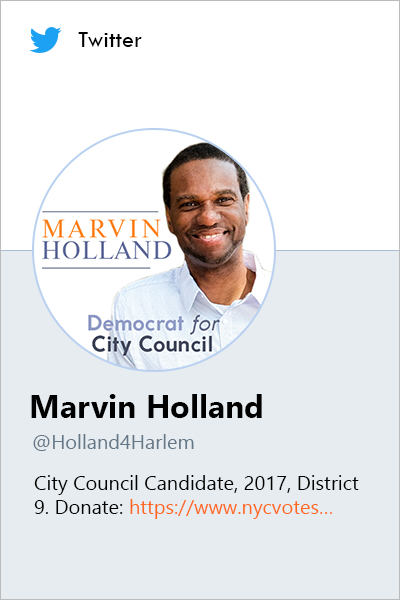
<style>
.page{position:relative;width:400px;height:600px;background:#e6ecf0}
.page>*{position:absolute;margin:0}
.t1{font:24px "TwCenMT-Regular";color:#000000}
.t2{font:32px "SegoeUI-Bold";color:#000000}
.t3{font:20px "SegoeUI";color:#657786}
.t4{font:20px "SegoeUI";color:#000000}
.t5{font:20px "SegoeUI";color:#ff691f}
</style>
<div class="page">
<p class="t1" style="left:78px;top:32px;width:64px;height:15px">Twitter</p>
<p class="t2" style="left:31px;top:394px;width:231px;height:24px">Marvin Holland</p>
<p class="t3" style="left:33px;top:434px;width:161px;height:17px">@Holland4Harlem</p>
<p class="t4" style="left:34px;top:475px;width:325px;height:44px">City Council Candidate, 2017, District 9. Donate: <span class="t5">https://www.nycvotes…</span></p>
</div>
